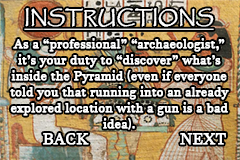
<style>
.page{position:relative;width:240px;height:160px}
.page>*{position:absolute;margin:0}
.t1{font:18px "Papyrus-Regular";color:#fefefe;font-weight:bold;text-decoration:underline}
.t2{font:13px/16px "JavaneseText";color:#ffffff;font-weight:bold}
.t3{font:13px/16px "AgencyFB-Reg";color:#ffffff;font-weight:bold}
.t4{font:16px "JavaneseText";color:#ffffff;font-weight:bold}
</style>
<div class="page">
<p class="t1" style="left:24px;top:8px;width:190px;height:22px">INSTRUCTIONS</p>
<p class="t2" style="left:10px;top:38px;width:219px;height:92px;text-align:center">As a “professional” “archaeologist,” it’s your duty to “discover” what’s inside the Pyramid <span class="t3">(</span>even if everyone told you that running into an already explored location with a gun is a bad idea<span class="t3">)</span>.</p>
<p class="t4" style="left:43px;top:133px;width:46px;height:12px">BACK</p>
<p class="t4" style="left:180px;top:133px;width:46px;height:12px">NEXT</p>
</div>
